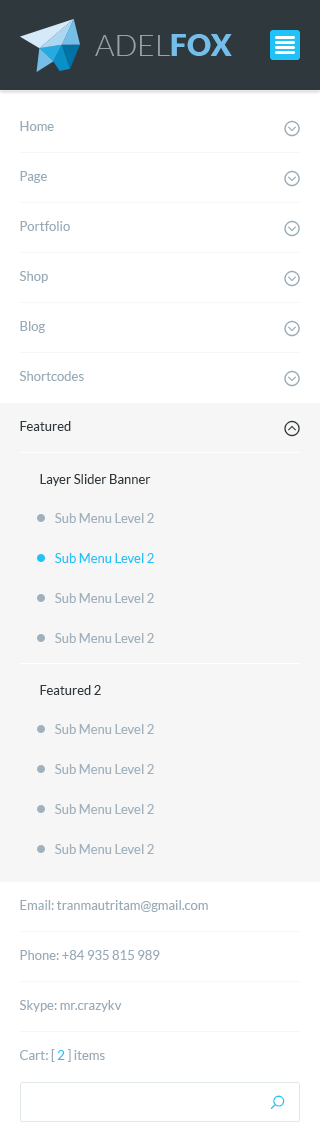
<style>
.page{position:relative;width:320px;height:1146px;background:#ffffff}
.page>*{position:absolute;margin:0}
.t1{font:30px "Lato-Light";color:#76beea;text-transform:uppercase}
.t2{font:30px "Lato-Black";color:#76beea;text-transform:uppercase}
.t3{font:30px "Lato-Light";color:#98a2a8;text-transform:uppercase}
.t4{font:13px/50px "Lato-Regular";color:#99abb7}
.t5{font:13px/50px "Lato-Regular";color:#2f383d}
.t6{font:13px "Lato-Regular";color:#2f383d}
.t7{font:13px/40px "Lato-Regular";color:#a1b1bc}
.t8{font:13px/40px "Lato-Regular";color:#21c2f8}
.t9{font:13px/50px "Lato-Regular";color:#21c2f8}
</style>
<div class="page">
<p class="t1" style="left:95px;top:35px;width:137px;height:22px">adel<span class="t2">fox</span></p>
<p class="t3" style="left:95px;top:34px;width:137px;height:22px">adel<span class="t2">fox</span></p>
<p class="t4" style="left:19px;top:121px;width:65px;height:310px">Home<br>Page<br>Portfolio<br>Shop<br>Blog<br>Shortcodes<br><span class="t5">Featured</span></p>
<p class="t6" style="left:40px;top:474px;width:111px;height:12px">Layer Slider Banner</p>
<p class="t7" style="left:55px;top:513px;width:99px;height:130px">Sub Menu Level 2<br><span class="t8">Sub Menu Level 2<br></span>Sub Menu Level 2<br>Sub Menu Level 2</p>
<p class="t6" style="left:40px;top:685px;width:61px;height:10px">Featured 2</p>
<p class="t7" style="left:55px;top:724px;width:99px;height:130px">Sub Menu Level 2<br>Sub Menu Level 2<br>Sub Menu Level 2<br>Sub Menu Level 2</p>
<p class="t4" style="left:19px;top:900px;width:189px;height:162px">Email: tranmautritam@gmail.com<br>Phone: +84 935 815 989<br>Skype: mr.crazykv<br>Cart: [ <span class="t9">2 </span>] items</p>
</div>
